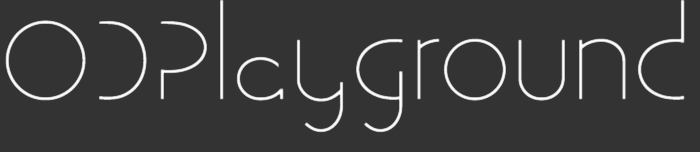
<style>
.page{position:relative;width:700px;height:152px;background:#333333}
.page>*{position:absolute;margin:0}
.t1{font:111.6px "Existence-Light"}
</style>
<div class="page">
<p class="t1" style="left:5px;top:0px;width:680px;height:133px">ODPlayground</p>
</div>
